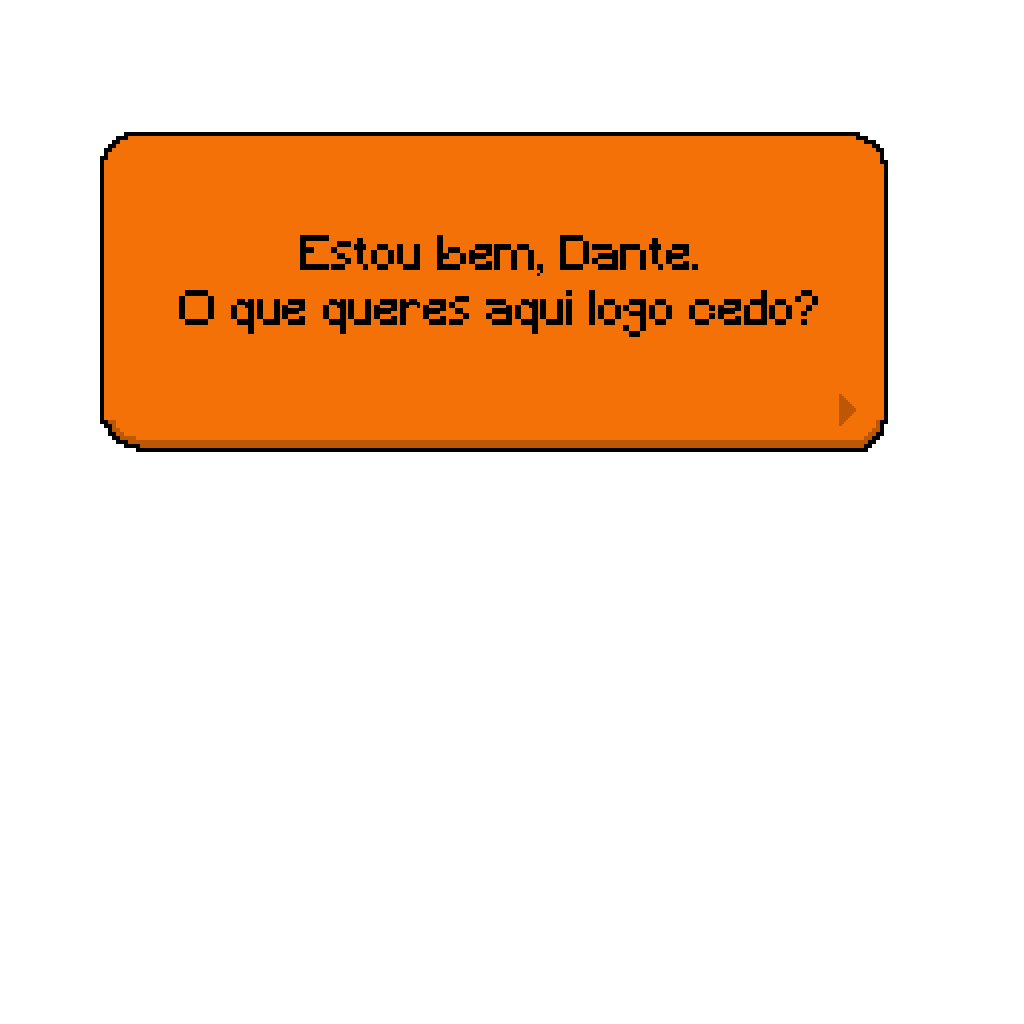
<style>
.page{position:relative;width:1024px;height:1024px;background:#ffffff}
.page>*{position:absolute;margin:0}
.t1{font:45.8px "Minecraft";color:#000000}
</style>
<div class="page">
<p class="t1" style="left:179px;top:235px;width:639px;height:102px;text-align:center">Estou bem, Dante.<br>O que queres aqui logo cedo?</p>
</div>
